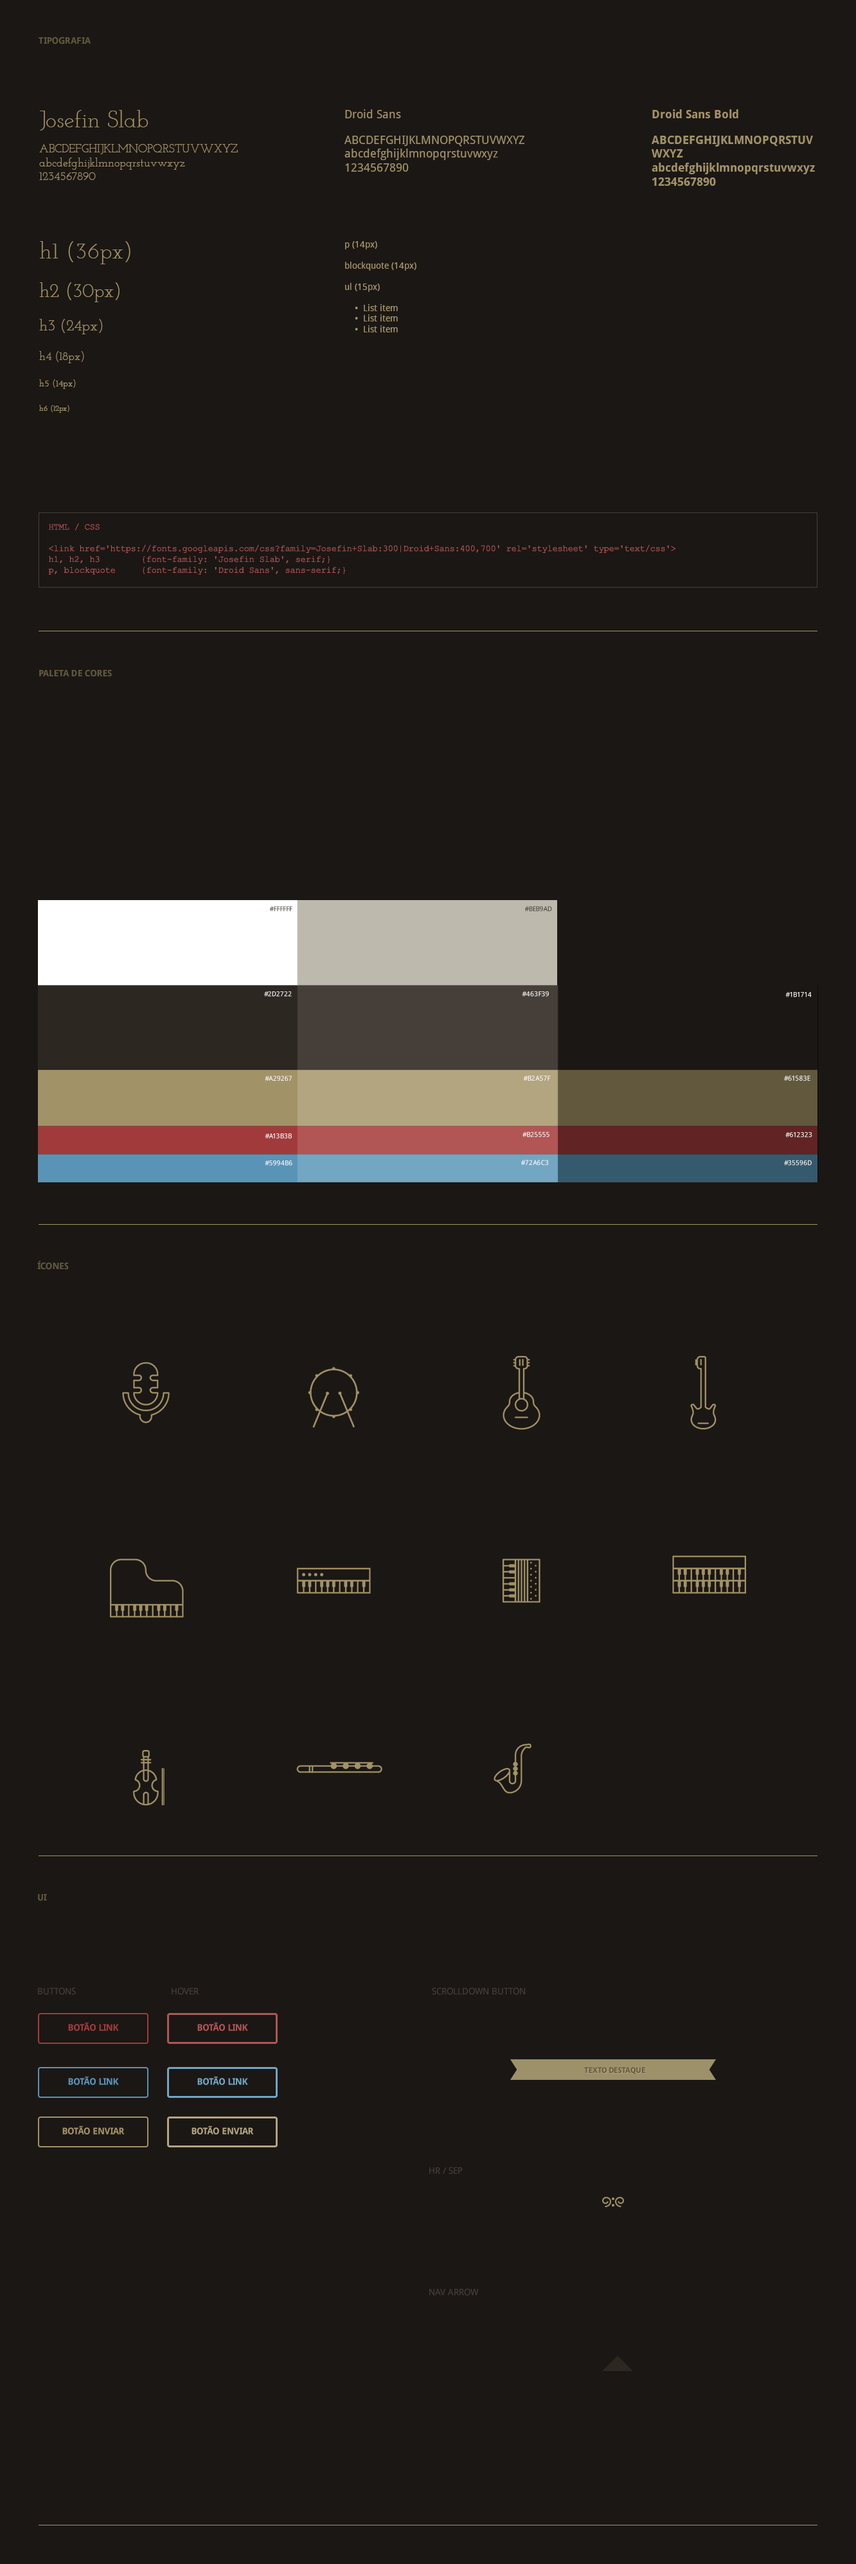
<style>
.page{position:relative;width:856px;height:2564px;background:#1b1714}
.page>*{position:absolute;margin:0}
.t1{font:9px "DroidSans-Bold";letter-spacing:-0.025em;color:#61583e;text-transform:uppercase}
.t2{font:11.6px "JosefinSlab";color:#a29267}
.t3{font:23.1px "JosefinSlab";color:#a29267}
.t4{font:11.6px "DroidSans";color:#a29267}
.t5{font:11.6px "DroidSans-Bold";color:#a29267}
.t6{font:19.3px "JosefinSlab";color:#a29267}
.t7{font:15.4px "JosefinSlab";color:#a29267}
.t8{font:9px "JosefinSlab";color:#a29267}
.t9{font:7.7px "JosefinSlab";color:#a29267}
.t10{font:9px "DroidSans";color:#a29267}
.t11{font:9px "CourierNewPSMT";color:#b25555}
.t12{font:6.7px "DroidSans";letter-spacing:-0.025em;color:#39332d;text-transform:uppercase}
.t13{font:6.7px "DroidSans";letter-spacing:-0.025em;color:#ffffff;text-transform:uppercase}
.t14{font:9px "DroidSans";color:#463f39;text-transform:uppercase}
.t15{font:9px "DroidSans-Bold";letter-spacing:-0.025em;color:#a13b3b;text-transform:uppercase}
.t16{font:9px "DroidSans-Bold";letter-spacing:-0.025em;color:#b25555;text-transform:uppercase}
.t17{font:7.7px "DroidSans-Bold";letter-spacing:-0.025em;color:#61583e;text-transform:uppercase}
.t18{font:9px "DroidSans-Bold";letter-spacing:-0.025em;color:#5994b6;text-transform:uppercase}
.t19{font:9px "DroidSans-Bold";letter-spacing:-0.025em;color:#72a6c3;text-transform:uppercase}
.t20{font:9px "DroidSans-Bold";letter-spacing:-0.025em;color:#a29267;text-transform:uppercase}
.t21{font:9px "DroidSans-Bold";letter-spacing:-0.025em;color:#b2a57f;text-transform:uppercase}
</style>
<div class="page">
<p class="t1" style="left:39px;top:37px;width:52px;height:7px">TIPOGRAFIA</p>
<p class="t2" style="left:39px;top:110px;width:199px;height:70px"><span class="t3">Josefin Slab<br></span>ABCDEFGHIJKLMNOPQRSTUVWXYZ<br>abcdefghijklmnopqrstuvwxyz<br>1234567890</p>
<p class="t4" style="left:345px;top:109px;width:180px;height:63px">Droid Sans<br>ABCDEFGHIJKLMNOPQRSTUVWXYZ<br>abcdefghijklmnopqrstuvwxyz<br>1234567890</p>
<p class="t5" style="left:652px;top:109px;width:163px;height:77px">Droid Sans Bold<br>ABCDEFGHIJKLMNOPQRSTUVWXYZ<br>abcdefghijklmnopqrstuvwxyz<br>1234567890</p>
<p class="t3" style="left:39px;top:241px;width:91px;height:172px">h1 (36px)<br><span class="t6">h2 (30px)<br></span><span class="t7">h3 (24px)<br></span><span class="t2">h4 (18px)<br></span><span class="t8">h5 (14px)<br></span><span class="t9">h6 (12px)</span></p>
<p class="t10" style="left:345px;top:241px;width:72px;height:91px">p (14px)<br>blockquote (14px)<br>ul (15px)<br>•  List item<br>•  List item<br>•  List item</p>
<p class="t11" style="left:48px;top:523px;width:628px;height:52px">HTML / CSS<br><br>&lt;link href='https://fonts.googleapis.com/css?family=Josefin+Slab:300|Droid+Sans:400,700' rel='stylesheet' type='text/css'&gt;<br>h1, h2, h3  {font-family: 'Josefin Slab', serif;}<br>p, blockquote  {font-family: 'Droid Sans', sans-serif;}</p>
<p class="t1" style="left:39px;top:669px;width:73px;height:8px">PALETA DE CORES</p>
<p class="t12" style="left:269px;top:906px;width:23px;height:6px">#FFFFFF</p>
<p class="t12" style="left:525px;top:906px;width:27px;height:6px">#beb9ad</p>
<p class="t13" style="left:264px;top:991px;width:28px;height:5px">#2d2722</p>
<p class="t13" style="left:522px;top:991px;width:27px;height:5px">#463f39</p>
<p class="t13" style="left:786px;top:992px;width:26px;height:5px">#1b1714</p>
<p class="t13" style="left:265px;top:1076px;width:27px;height:5px">#a29267</p>
<p class="t13" style="left:523px;top:1076px;width:28px;height:5px">#b2a57f</p>
<p class="t13" style="left:784px;top:1076px;width:27px;height:5px">#61583e</p>
<p class="t13" style="left:265px;top:1133px;width:27px;height:5px">#a13b3b</p>
<p class="t13" style="left:523px;top:1131px;width:27px;height:6px">#b25555</p>
<p class="t13" style="left:786px;top:1132px;width:27px;height:5px">#612323</p>
<p class="t13" style="left:265px;top:1160px;width:27px;height:6px">#5994b6</p>
<p class="t13" style="left:521px;top:1160px;width:28px;height:5px">#72a6c3</p>
<p class="t13" style="left:784px;top:1160px;width:28px;height:6px">#35596d</p>
<p class="t1" style="left:37px;top:1261px;width:32px;height:9px">ÍCONES</p>
<p class="t1" style="left:38px;top:1894px;width:9px;height:7px">UI</p>
<p class="t14" style="left:38px;top:1987px;width:38px;height:8px">BUTTONS</p>
<p class="t14" style="left:172px;top:1987px;width:27px;height:8px">HOVER</p>
<p class="t14" style="left:432px;top:1987px;width:93px;height:8px">scrolldown button</p>
<p class="t15" style="left:68px;top:2022px;width:51px;height:9px">BOTÃO LINK</p>
<p class="t16" style="left:197px;top:2022px;width:51px;height:9px"><span class="t15"><br></span>BOTÃO LINK</p>
<p class="t17" style="left:584px;top:2067px;width:61px;height:7px">TEXTO DESTAQUE</p>
<p class="t18" style="left:68px;top:2076px;width:51px;height:9px"><span class="t15"><br></span>BOTÃO LINK</p>
<p class="t19" style="left:197px;top:2076px;width:51px;height:9px"><span class="t15"><br></span>BOTÃO LINK</p>
<p class="t20" style="left:62px;top:2125px;width:63px;height:9px"><span class="t15"><br></span>BOTÃO ENVIAR</p>
<p class="t21" style="left:192px;top:2125px;width:62px;height:9px"><span class="t15"><br></span>BOTÃO ENVIAR</p>
<p class="t14" style="left:429px;top:2166px;width:34px;height:8px">HR / SEP</p>
<p class="t14" style="left:429px;top:2288px;width:50px;height:8px">NAV ARROW</p>
</div>
